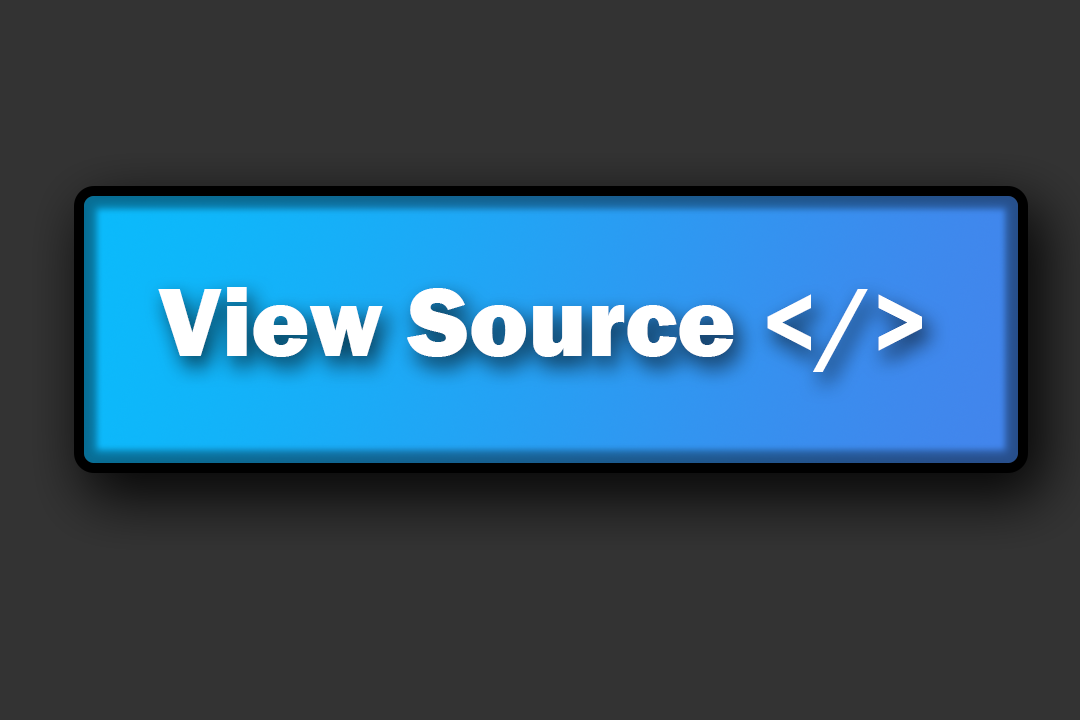
<style>
.page{position:relative;width:1080px;height:720px;background:#333333}
.page>*{position:absolute;margin:0}
.t1{font:100px "FranklinGothic-Heavy";color:#ffffff}
</style>
<div class="page">
<p class="t1" style="left:158px;top:287px;width:764px;height:85px">View Source &lt;/&gt;</p>
</div>
